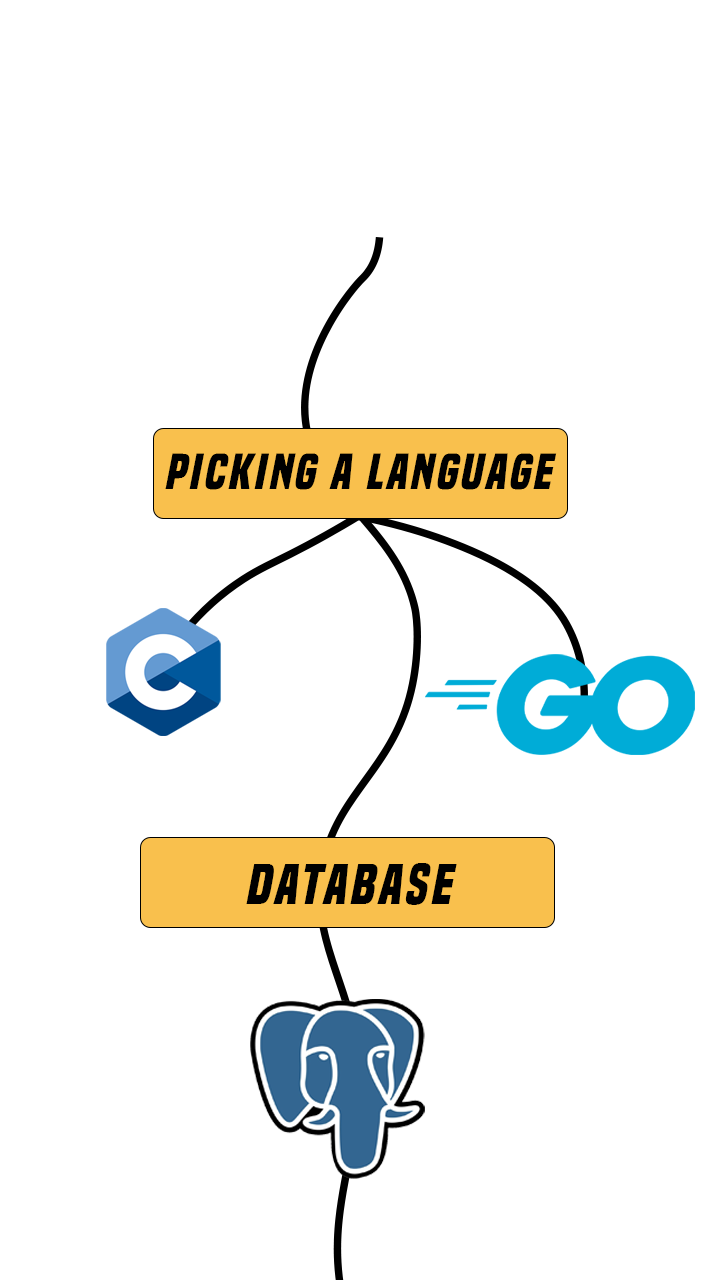
<style>
.page{position:relative;width:720px;height:1280px;background:#ffffff}
.page>*{position:absolute;margin:0}
.t1{font:47px "BuiltTitlingRg-BoldItalic";letter-spacing:0.025em;color:#000000;scale:1.1 1}
.t2{font:53.1px "BuiltTitlingRg-BoldItalic";letter-spacing:0.025em;color:#000000;scale:1.1 1}
</style>
<div class="page">
<p class="t1" style="left:165px;top:453px;width:392px;height:37px">Picking a Language</p>
<p class="t2" style="left:246px;top:863px;width:211px;height:42px">Database</p>
</div>
